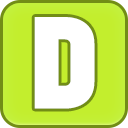
<style>
.page{position:relative;width:128px;height:128px;background:#ffffff}
.page>*{position:absolute;margin:0}
.t1{font:120px "Faktos";color:#ffffff}
</style>
<div class="page">
<p class="t1" style="left:34px;top:17px;width:61px;height:92px">D</p>
</div>
